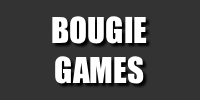
<style>
.page{position:relative;width:200px;height:100px;background:#333333}
.page>*{position:absolute;margin:0}
.t1{font:33px "TRImpact";color:#ffffff}
</style>
<div class="page">
<p class="t1" style="left:52px;top:16px;width:95px;height:68px;text-align:center">BOUGIE<br>GAMES</p>
</div>
